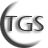
<style>
.page{position:relative;width:48px;height:48px;background:#ffffff}
.page>*{position:absolute;margin:0}
.t1{font:22.7px "ErasITC-Medium";color:#3c3c3c}
</style>
<div class="page">
<p class="t1" style="left:5px;top:16px;width:39px;height:15px">TGS</p>
</div>
